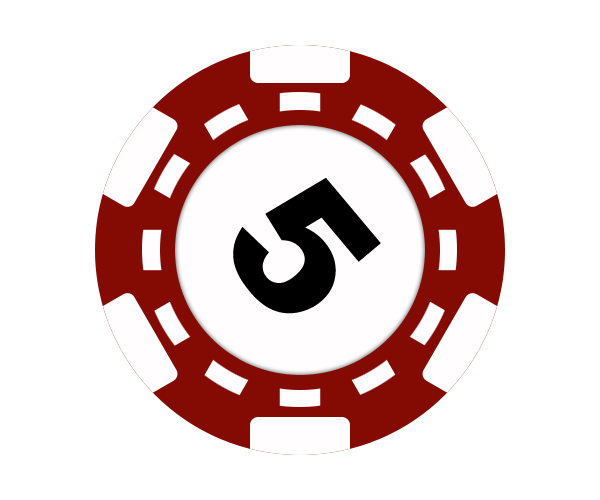
<style>
.page{position:relative;width:600px;height:500px;background:#ffffff}
.page>*{position:absolute;margin:0}
.t1{font:180px "Arial-Black";color:#000000}
</style>
<div class="page">
<p class="t1" style="left:233px;top:178px;width:148px;height:136px;rotate:50deg">5</p>
</div>
